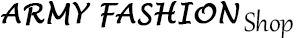
<style>
.page{position:relative;width:300px;height:38px;background:#ffffff}
.page>*{position:absolute;margin:0}
.t1{font:27px "LucidaHandwriting-Italic";color:#000000;font-weight:bold}
.t2{font:32.6px "Gabriola";color:#000000}
</style>
<div class="page">
<p class="t1" style="left:1px;top:1px;width:239px;height:27px">ARMY FASHION</p>
<p class="t2" style="left:244px;top:9px;width:49px;height:30px">Shop</p>
</div>
